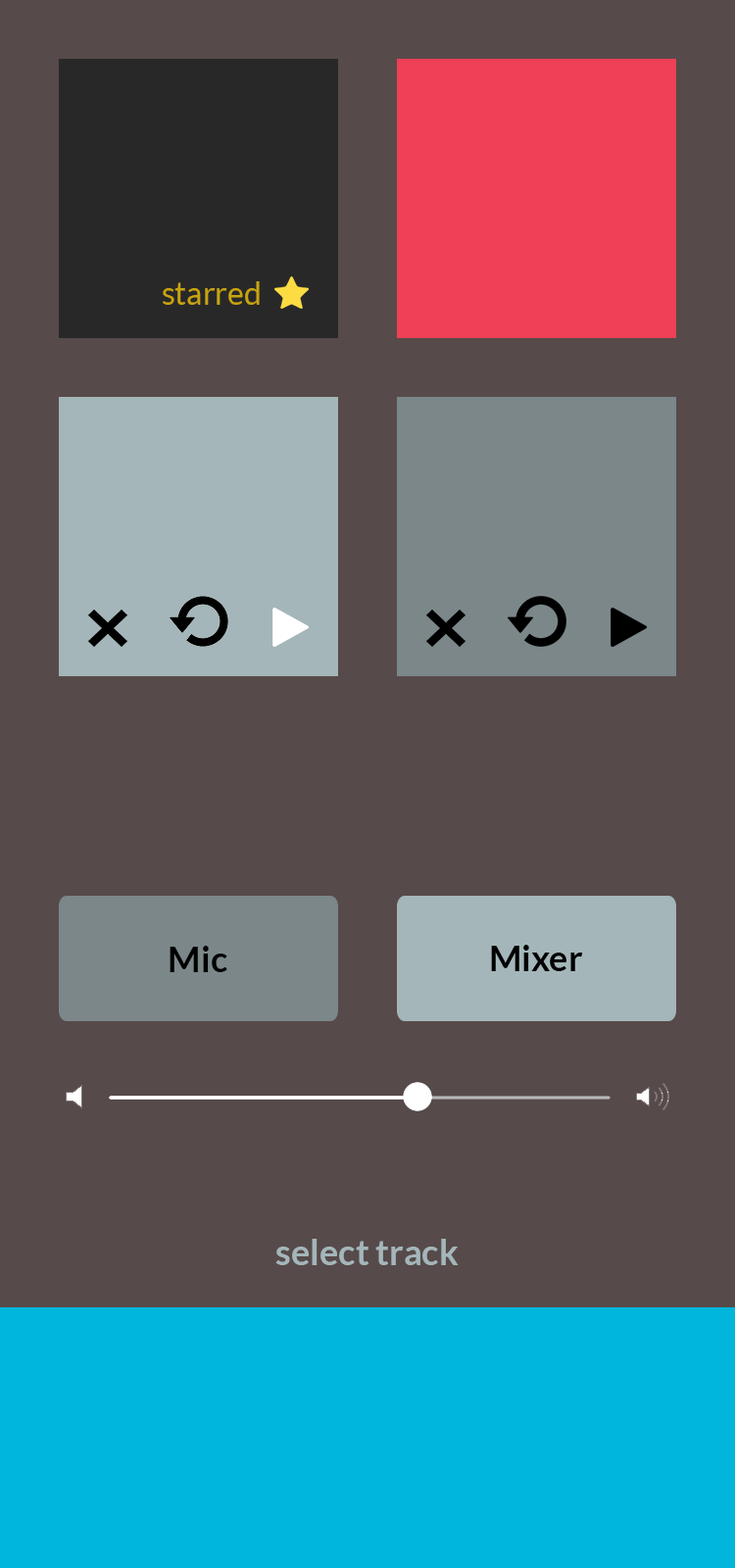
<style>
.page{position:relative;width:735px;height:1568px;background:#574a4a}
.page>*{position:absolute;margin:0}
.t1{font:31.4px "Lato-Regular";color:#c8a40e}
.t2{font:35.3px "Lato-Bold";color:#000000}
.t3{font:35.3px "Lato-Bold";color:#a4b6b9}
</style>
<div class="page">
<p class="t1" style="left:163px;top:281px;width:97px;height:24px">starred</p>
<p class="t2" style="left:170px;top:946px;width:57px;height:26px">Mic</p>
<p class="t2" style="left:491px;top:945px;width:92px;height:26px">Mixer</p>
<p class="t3" style="left:275px;top:1239px;width:184px;height:26px">select track</p>
</div>
